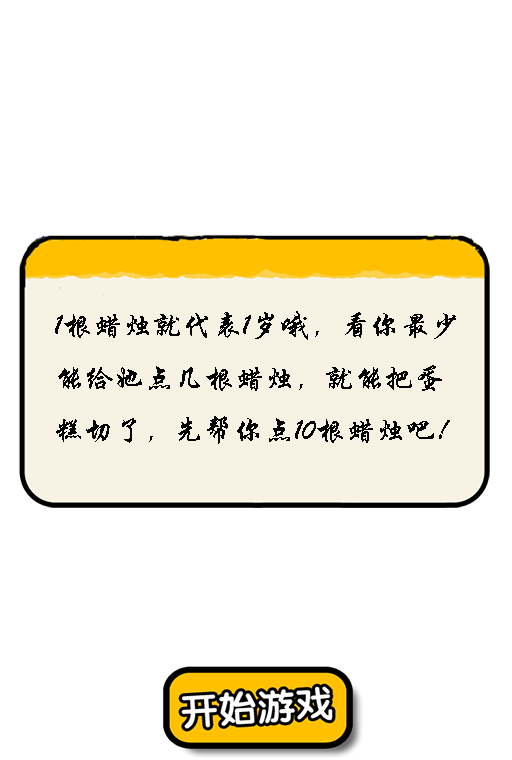
<style>
.page{position:relative;width:512px;height:760px;background:#ffffff}
.page>*{position:absolute;margin:0}
.t1{font:30px "STXingkai";color:#030303}
</style>
<div class="page">
<p class="t1" style="left:55px;top:311px;width:401px;height:133px">1根蜡烛就代表1岁哦，看你最少能给她点几根蜡烛，就能把蛋糕切了，先帮你点10根蜡烛吧！</p>
</div>
